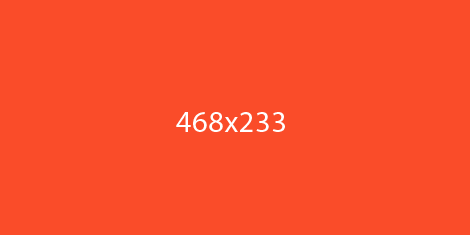
<style>
.page{position:relative;width:470px;height:235px;background:#fa4c29}
.page>*{position:absolute;margin:0}
.t1{font:30px "MyriadPro-Regular";letter-spacing:0.025em;color:#ffffff}
</style>
<div class="page">
<p class="t1" style="left:176px;top:112px;width:109px;height:20px">468x233</p>
</div>
